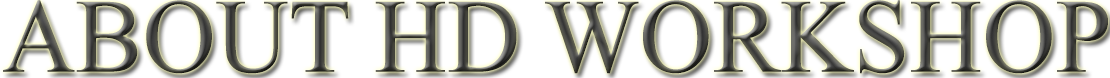
<style>
.page{position:relative;width:1110px;height:78px;background:#ffffff}
.page>*{position:absolute;margin:0}
.t1{font:105.5px "TimesNewRomanPSMT";scale:0.96 1}
</style>
<div class="page">
<p class="t1" style="left:3px;top:0px;width:1105px;height:74px">ABOUT HD WORKSHOP</p>
</div>
